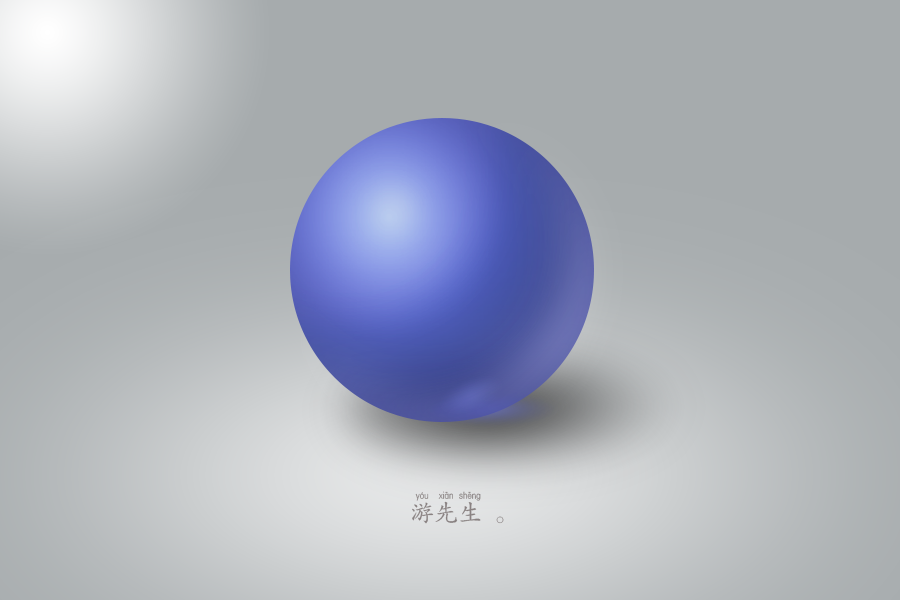
<style>
.page{position:relative;width:900px;height:600px;background:#a6abad}
.page>*{position:absolute;margin:0}
.t1{font:24px "FZKTPY01--GB1-0";color:#898181}
</style>
<div class="page">
<p class="t1" style="left:412px;top:491px;width:92px;height:33px">游先生 。</p>
</div>
